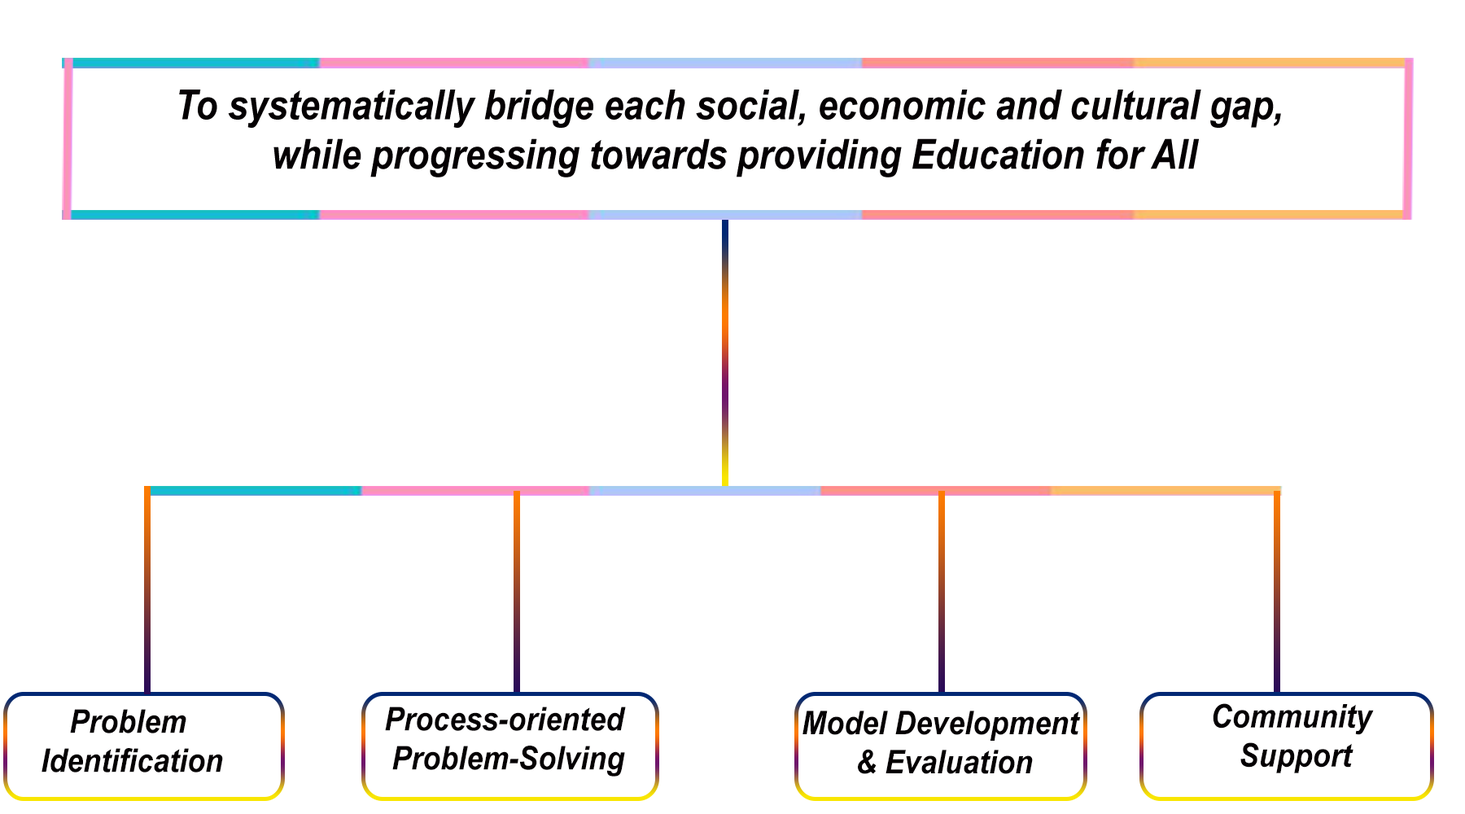
<style>
.page{position:relative;width:1465px;height:814px;background:#ffffff}
.page>*{position:absolute;margin:0}
.t1{font:41.2px "Arial-BoldItalicMT";color:#040002;scale:0.87 1}
.t2{font:32.6px "Arial-BoldItalicMT";color:#040002;scale:0.9 1}
</style>
<div class="page">
<p class="t1" style="left:179px;top:90px;width:1102px;height:87px;text-align:center">To systematically bridge each social, economic and cultural gap, <br>while progressing towards providing Education for All</p>
<p class="t2" style="left:42px;top:709px;width:181px;height:63px;text-align:center">Problem <br>Identification</p>
<p class="t2" style="left:385px;top:706px;width:241px;height:70px;text-align:center">Process-oriented <br>Problem-Solving</p>
<p class="t2" style="left:803px;top:711px;width:278px;height:63px;text-align:center">Model Development <br>&amp; Evaluation</p>
<p class="t2" style="left:1213px;top:703px;width:161px;height:70px;text-align:center">Community <br>Support</p>
</div>
